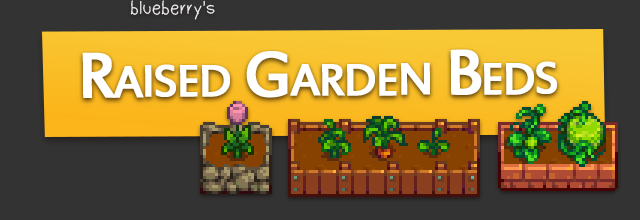
<style>
.page{position:relative;width:640px;height:220px;background:#333333}
.page>*{position:absolute;margin:0}
.t1{font:20px "Dudu_Calligraphy";color:#f2f2f2}
.t2{font:70px "EstrangeloEdessa";letter-spacing:-0.05em;color:#ffffff;font-variant:small-caps;font-weight:bold}
</style>
<div class="page">
<p class="t1" style="left:130px;top:0px;width:85px;height:20px">blueberry's</p>
<p class="t2" style="left:82px;top:49px;width:475px;height:49px">Raised Garden Beds</p>
</div>
